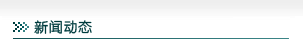
<style>
.page{position:relative;width:303px;height:47px;background:#ffffff}
.page>*{position:absolute;margin:0}
.t1{font:14px "FZY3JW--GB1-0";letter-spacing:0.05em;color:#003c3e}
</style>
<div class="page">
<p class="t1" style="left:34px;top:20px;width:58px;height:14px">新闻动态</p>
</div>
